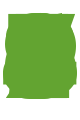
<style>
.page{position:relative;width:80px;height:120px;background:#63a431}
.page>*{position:absolute;margin:0}
.t1{font:116.3px "AzoSansUber-Regular";letter-spacing:0.01em;color:#63a431;scale:0.95 1}
</style>
<div class="page">
<p class="t1" style="left:3px;top:14px;width:74px;height:85px">4</p>
<p class="t1" style="left:3px;top:13px;width:74px;height:86px">8</p>
<p class="t1" style="left:5px;top:14px;width:71px;height:86px">6</p>
<p class="t1" style="left:5px;top:12px;width:71px;height:86px">9</p>
</div>
